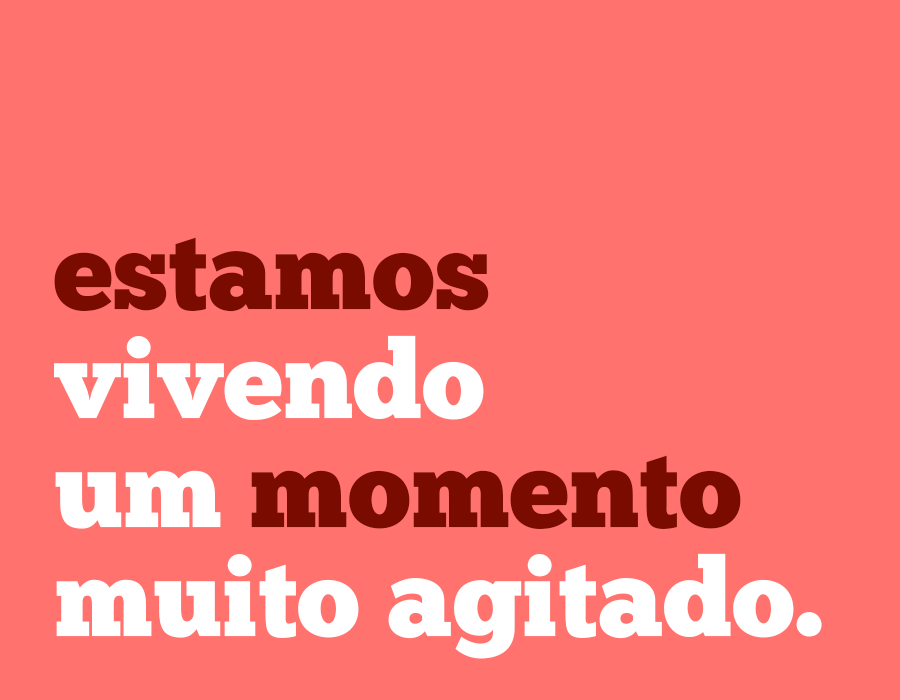
<style>
.page{position:relative;width:900px;height:700px;background:#ff726e}
.page>*{position:absolute;margin:0}
.t1{font:109.5px/108.8px "ChunkFive-Roman";color:#ffffff}
.t2{font:109.5px/108.8px "ChunkFive-Roman";color:#7a0b00}
</style>
<div class="page">
<p class="t1" style="left:54px;top:237px;width:768px;height:422px"><span class="t2">estamos<br></span>vivendo<br>um <span class="t2">momento<br></span>muito agitado.</p>
</div>
